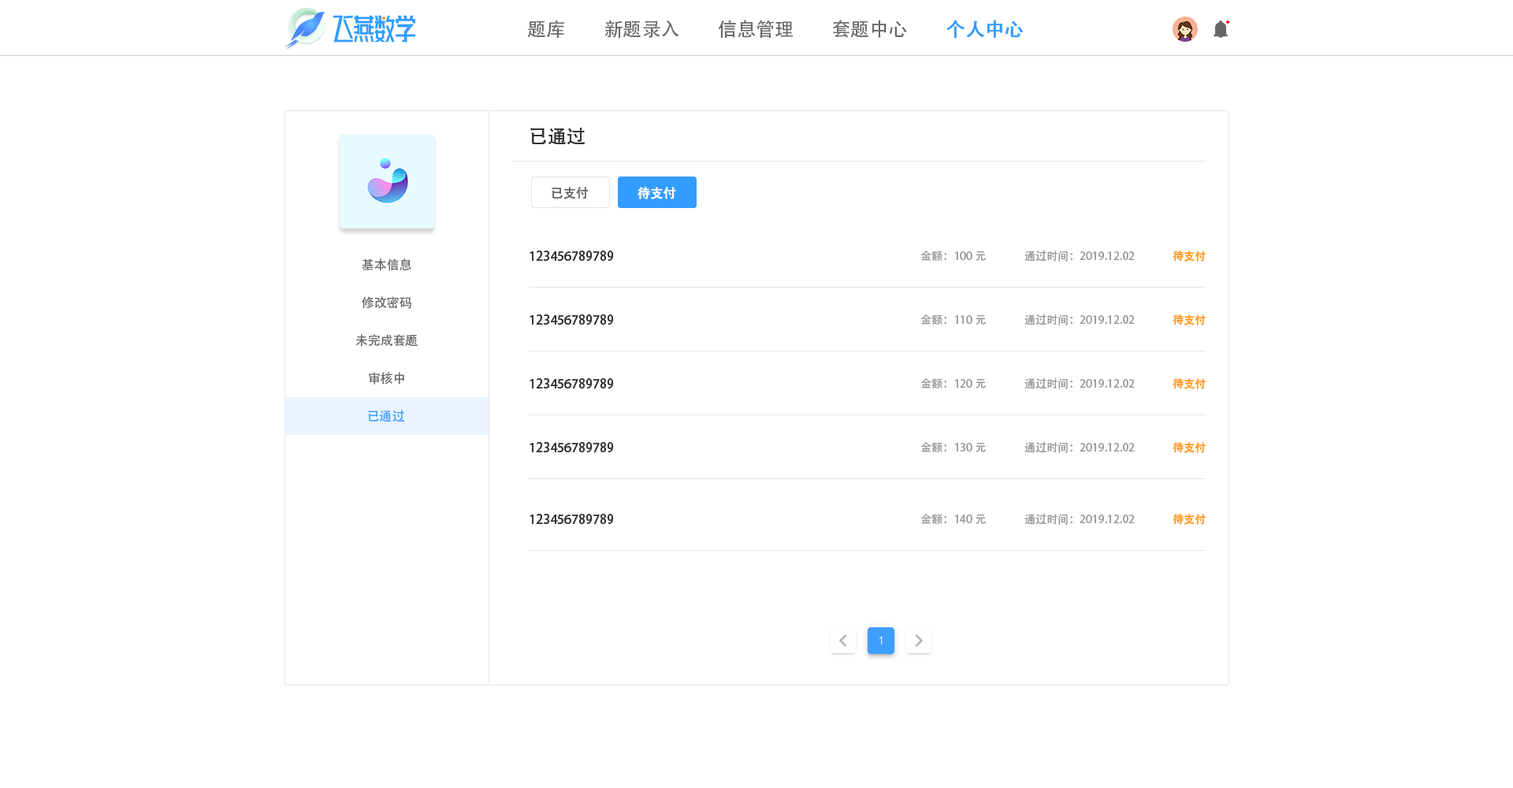
<style>
.page{position:relative;width:1513px;height:788px;background:#ffffff}
.page>*{position:absolute;margin:0}
.t1{font:18.9px "AdobeHeitiStd-Regular";color:#666666}
.t2{font:18.9px "AdobeHeitiStd-Regular";color:#339dff;font-weight:bold}
.t3{font:18.9px "AdobeHeitiStd-Regular";color:#333333}
.t4{font:12.6px "AdobeHeitiStd-Regular";color:#666666}
.t5{font:12.6px "AdobeHeitiStd-Regular";color:#ffffff;font-weight:bold}
.t6{font:12.6px "AdobeHeitiStd-Regular";color:#333333}
.t7{font:11px "AdobeHeitiStd-Regular";color:#999999}
.t8{font:11px "AdobeHeitiStd-Regular";color:#ff9814}
.t9{font:12.6px "AdobeHeitiStd-Regular";color:#409eff}
</style>
<div class="page">
<p class="t1" style="left:527px;top:20px;width:37px;height:18px">题库</p>
<p class="t1" style="left:604px;top:20px;width:75px;height:18px">新题录入</p>
<p class="t1" style="left:718px;top:20px;width:75px;height:19px">信息管理</p>
<p class="t1" style="left:833px;top:20px;width:74px;height:18px">套题中心</p>
<p class="t2" style="left:946px;top:20px;width:78px;height:19px">个人中心</p>
<p class="t3" style="left:530px;top:128px;width:55px;height:17px">已通过</p>
<p class="t3" style="left:530px;top:128px;width:55px;height:17px">已通过</p>
<p class="t4" style="left:552px;top:187px;width:36px;height:12px">已支付</p>
<p class="t4" style="left:552px;top:187px;width:36px;height:12px">已支付</p>
<p class="t5" style="left:638px;top:187px;width:38px;height:12px">待支付</p>
<p class="t5" style="left:638px;top:187px;width:38px;height:12px">待支付</p>
<p class="t6" style="left:530px;top:251px;width:84px;height:10px">123456789789</p>
<p class="t6" style="left:530px;top:251px;width:84px;height:10px">123456789789</p>
<p class="t7" style="left:920px;top:251px;width:66px;height:10px">金额：100元</p>
<p class="t7" style="left:1024px;top:250px;width:111px;height:12px">通过时间：2019.12.02</p>
<p class="t8" style="left:1173px;top:251px;width:33px;height:11px">待支付</p>
<p class="t8" style="left:1173px;top:251px;width:33px;height:11px">待支付</p>
<p class="t4" style="left:362px;top:258px;width:50px;height:13px">基本信息</p>
<p class="t4" style="left:362px;top:258px;width:50px;height:13px">基本信息</p>
<p class="t4" style="left:362px;top:296px;width:49px;height:13px">修改密码</p>
<p class="t4" style="left:362px;top:296px;width:49px;height:13px">修改密码</p>
<p class="t6" style="left:530px;top:314px;width:84px;height:11px">123456789789</p>
<p class="t6" style="left:530px;top:314px;width:84px;height:11px">123456789789</p>
<p class="t7" style="left:920px;top:314px;width:66px;height:11px">金额：110元</p>
<p class="t7" style="left:1024px;top:314px;width:111px;height:11px">通过时间：2019.12.02</p>
<p class="t8" style="left:1173px;top:314px;width:33px;height:11px">待支付</p>
<p class="t8" style="left:1173px;top:314px;width:33px;height:11px">待支付</p>
<p class="t4" style="left:355px;top:334px;width:63px;height:13px">未完成套题</p>
<p class="t4" style="left:355px;top:334px;width:63px;height:13px">未完成套题</p>
<p class="t4" style="left:369px;top:372px;width:35px;height:13px">审核中</p>
<p class="t4" style="left:369px;top:372px;width:35px;height:13px">审核中</p>
<p class="t7" style="left:1024px;top:377px;width:111px;height:12px">通过时间：2019.12.02</p>
<p class="t6" style="left:530px;top:378px;width:84px;height:11px">123456789789</p>
<p class="t6" style="left:530px;top:378px;width:84px;height:11px">123456789789</p>
<p class="t7" style="left:920px;top:378px;width:66px;height:11px">金额：120元</p>
<p class="t8" style="left:1173px;top:378px;width:33px;height:11px">待支付</p>
<p class="t8" style="left:1173px;top:378px;width:33px;height:11px">待支付</p>
<p class="t9" style="left:368px;top:410px;width:37px;height:12px">已通过</p>
<p class="t9" style="left:368px;top:410px;width:37px;height:12px">已通过</p>
<p class="t6" style="left:530px;top:442px;width:84px;height:10px">123456789789</p>
<p class="t6" style="left:530px;top:442px;width:84px;height:10px">123456789789</p>
<p class="t7" style="left:920px;top:442px;width:66px;height:10px">金额：130元</p>
<p class="t7" style="left:1024px;top:441px;width:111px;height:12px">通过时间：2019.12.02</p>
<p class="t8" style="left:1173px;top:442px;width:33px;height:11px">待支付</p>
<p class="t8" style="left:1173px;top:442px;width:33px;height:11px">待支付</p>
<p class="t6" style="left:530px;top:514px;width:84px;height:10px">123456789789</p>
<p class="t6" style="left:530px;top:514px;width:84px;height:10px">123456789789</p>
<p class="t7" style="left:920px;top:514px;width:66px;height:10px">金额：140元</p>
<p class="t7" style="left:1024px;top:513px;width:111px;height:12px">通过时间：2019.12.02</p>
<p class="t8" style="left:1173px;top:514px;width:33px;height:11px">待支付</p>
<p class="t8" style="left:1173px;top:514px;width:33px;height:11px">待支付</p>
</div>
